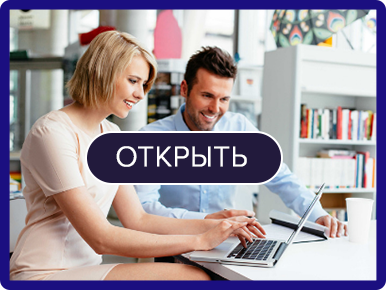
<style>
.page{position:relative;width:386px;height:290px}
.page>*{position:absolute;margin:0}
.t1{font:29.3px "ProximaNova-Light";color:#ffffff;text-transform:uppercase;font-weight:bold}
</style>
<div class="page">
<p class="t1" style="left:116px;top:146px;width:131px;height:21px">открыть</p>
</div>
